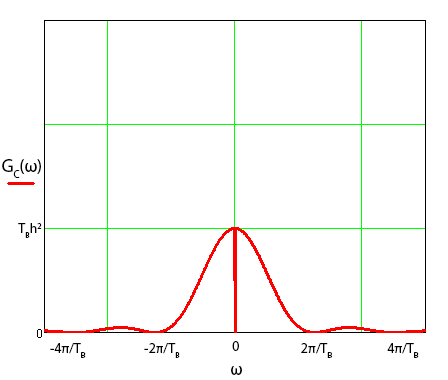
<style>
.page{position:relative;width:448px;height:380px;background:#ffffff}
.page>*{position:absolute;margin:0}
.t1{font:18px "MyriadPro-Regular";color:#000000}
.t2{font:14px "MyriadPro-Regular";color:#000000}
</style>
<div class="page">
<p class="t1" style="left:2px;top:159px;width:39px;height:19px">GC(ω)</p>
<p class="t2" style="left:18px;top:223px;width:24px;height:15px">TBh2</p>
<p class="t2" style="left:232px;top:341px;width:7px;height:10px">0</p>
<p class="t2" style="left:50px;top:343px;width:36px;height:15px">-4π/TB</p>
<p class="t2" style="left:144px;top:343px;width:36px;height:15px">-2π/TB</p>
<p class="t2" style="left:301px;top:343px;width:31px;height:15px">2π/TB</p>
<p class="t2" style="left:387px;top:343px;width:32px;height:15px">4π/TB</p>
<p class="t1" style="left:231px;top:366px;width:11px;height:9px">ω</p>
</div>
